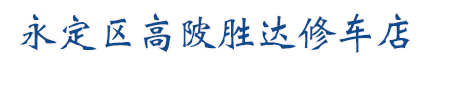
<style>
.page{position:relative;width:475px;height:93px;background:#ffffff}
.page>*{position:absolute;margin:0}
.t1{font:40px "GBWeiBei-Bold";color:#0d4a8e}
</style>
<div class="page">
<p class="t1" style="left:20px;top:13px;width:390px;height:40px">永定区高陂胜达修车店</p>
</div>
